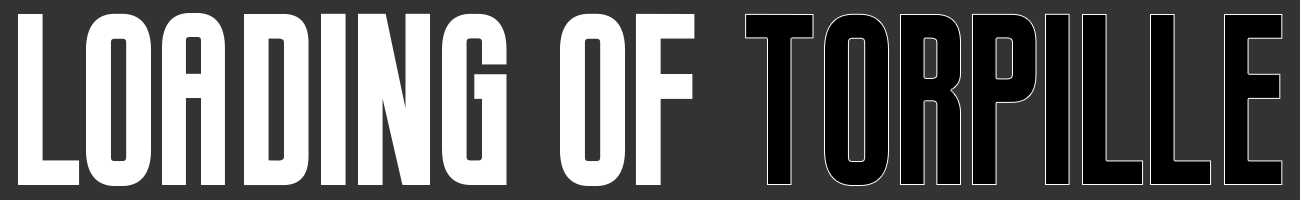
<style>
.page{position:relative;width:1300px;height:200px;background:#333333}
.page>*{position:absolute;margin:0}
.t1{font:170.6px "BOXING";color:#ffffff}
.t2{font:170.6px "BOXING";color:#000000}
</style>
<div class="page">
<p class="t1" style="left:18px;top:13px;width:1265px;height:173px">loading of <span class="t2">torpille</span></p>
</div>
